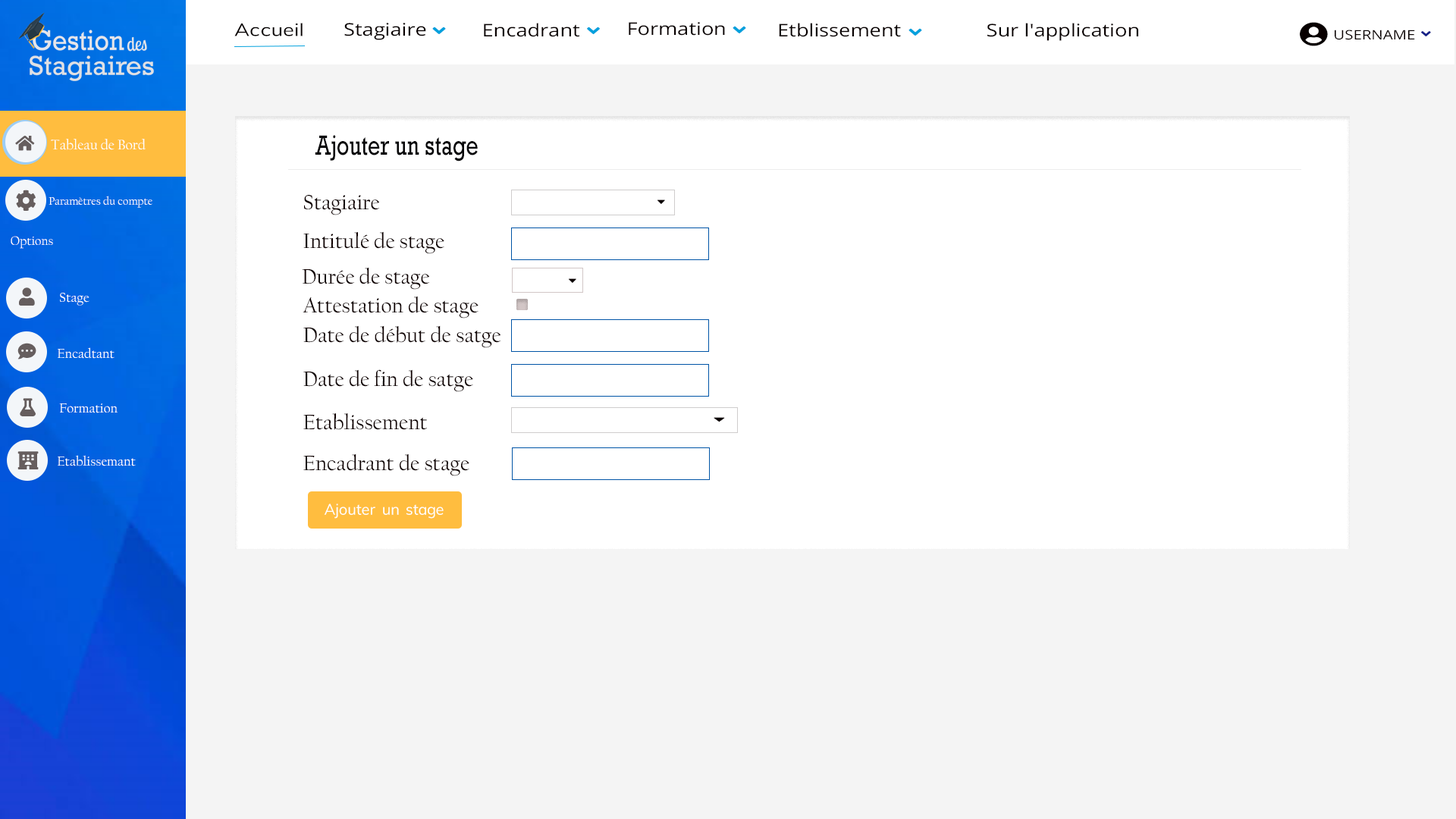
<style>
.page{position:relative;width:1456px;height:819px;background:#ffffff}
.page>*{position:absolute;margin:0}
.t1{font:17.4px "OpenSans";color:#080000;scale:1.18 1}
.t2{font:13.1px "OpenSans";color:#080000;scale:1.18 1}
.t3{font:28px "Rockwell";color:#070709;scale:0.77 1}
.t4{font:14.4px "CalifornianFB-Reg";color:#ffffff}
.t5{font:11.5px "CalifornianFB-Reg";color:#ffffff}
.t6{font:21.6px "CalifornianFB-Reg";color:#100202}
.t7{font:12.9px "CalifornianFB-Reg";color:#ffffff}
.t8{font:13.6px "CalifornianFB-Reg";color:#ffffff}
</style>
<div class="page">
<p class="t1" style="left:344px;top:23px;width:82px;height:17px">Stagiaire</p>
<p class="t1" style="left:484px;top:23px;width:95px;height:14px">Encadrant</p>
<p class="t1" style="left:629px;top:22px;width:96px;height:14px">Formation</p>
<p class="t1" style="left:779px;top:23px;width:122px;height:14px">Etblissement</p>
<p class="t1" style="left:987px;top:23px;width:151px;height:18px">Sur l'application</p>
<p class="t2" style="left:1335px;top:30px;width:80px;height:10px">USERNAME</p>
<p class="t3" style="left:315px;top:135px;width:163px;height:27px">Ajouter un stage</p>
<p class="t4" style="left:51px;top:139px;width:95px;height:11px">Tableau de Bord</p>
<p class="t5" style="left:49px;top:196px;width:103px;height:12px">Paramètres du compte</p>
<p class="t6" style="left:304px;top:195px;width:76px;height:20px">Stagiaire</p>
<p class="t6" style="left:303px;top:231px;width:141px;height:23px">Intitulé de stage</p>
<p class="t7" style="left:11px;top:236px;width:42px;height:13px">Options</p>
<p class="t6" style="left:302px;top:267px;width:128px;height:23px">Durée de stage</p>
<p class="t8" style="left:60px;top:293px;width:29px;height:13px">Stage</p>
<p class="t6" style="left:303px;top:296px;width:176px;height:22px">Attestation de stage</p>
<p class="t6" style="left:303px;top:325px;width:198px;height:23px">Date de début de satge</p>
<p class="t8" style="left:58px;top:347px;width:57px;height:12px">Encadtant</p>
<p class="t6" style="left:303px;top:369px;width:170px;height:23px">Date de fin de satge</p>
<p class="t8" style="left:59px;top:403px;width:59px;height:10px">Formation</p>
<p class="t6" style="left:303px;top:413px;width:124px;height:17px">Etablissement</p>
<p class="t8" style="left:58px;top:455px;width:78px;height:11px">Etablissemant</p>
<p class="t6" style="left:303px;top:453px;width:166px;height:23px">Encadrant de stage</p>
</div>
